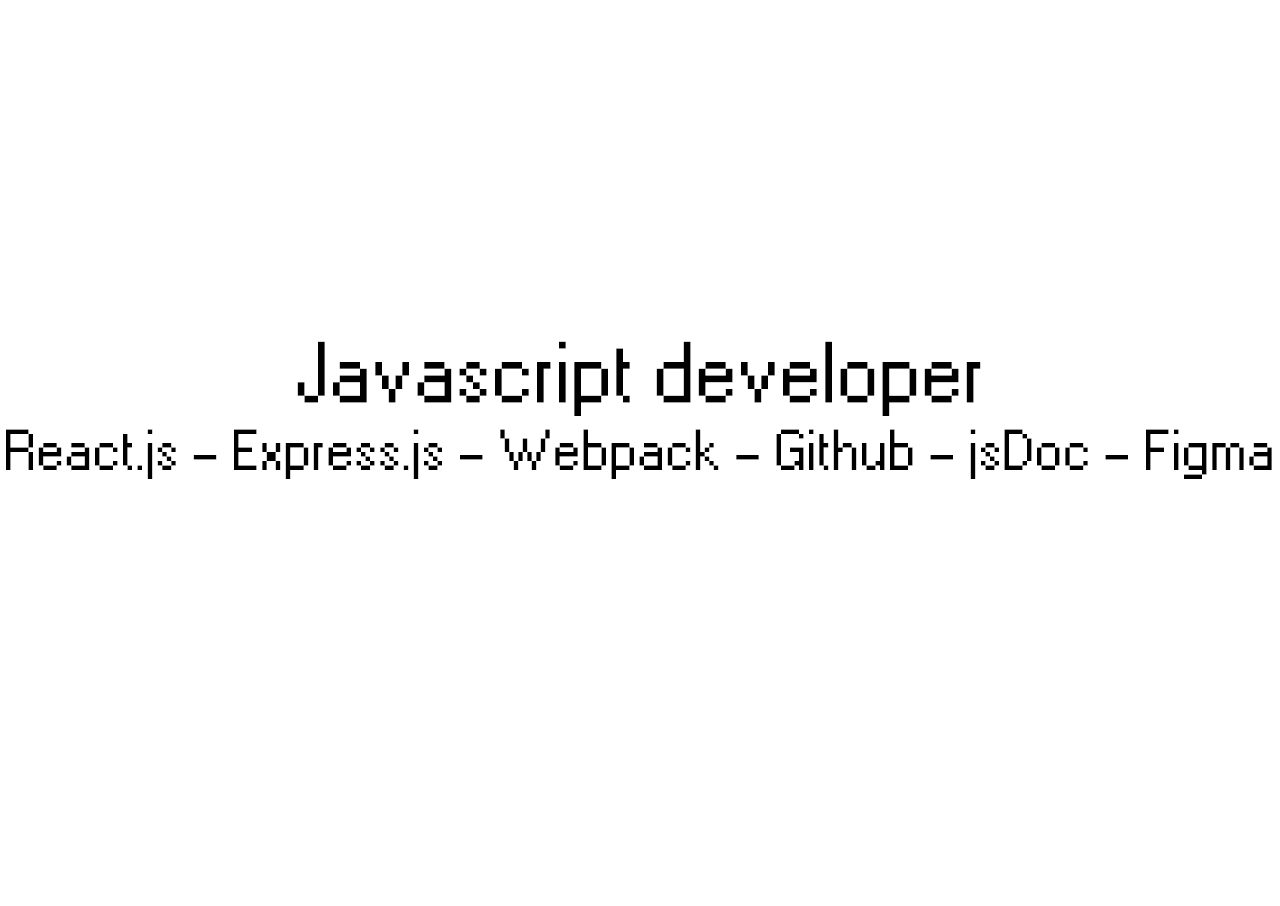
<style>
.page{position:relative;width:1280px;height:906px;background:#ffffff}
.page>*{position:absolute;margin:0}
.t1{font:56.2px "W95FARegular";color:#000000}
.t2{font:84.3px "W95FARegular";color:#000000}
</style>
<div class="page">
<p class="t1" style="left:6px;top:341px;width:1266px;height:138px;text-align:center"><span class="t2">Javascript developer<br></span>React.js - Express.js - Webpack - Github - jsDoc - Figma</p>
</div>
